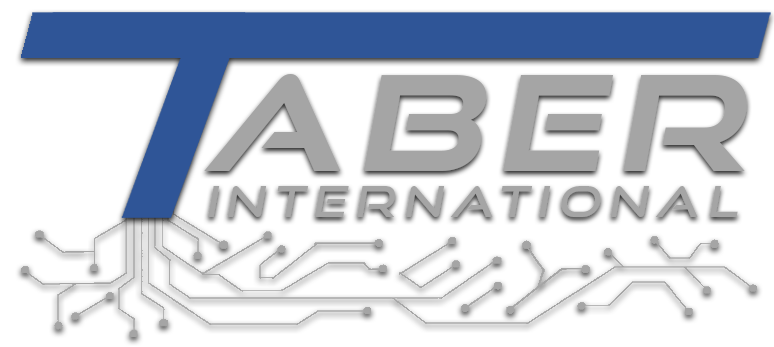
<style>
.page{position:relative;width:774px;height:347px;background:#ffffff}
.page>*{position:absolute;margin:0}
.t1{font:131.4px "GoodTimesRg-BoldItalic";letter-spacing:0.1em;color:#a5a5a5;scale:1.06 1}
.t2{font:42.1px "GoodTimesRg-Italic";letter-spacing:0.2em;color:#a5a5a5;scale:1.04 1}
</style>
<div class="page">
<p class="t1" style="left:204px;top:74px;width:543px;height:97px">aber</p>
<p class="t2" style="left:208px;top:186px;width:530px;height:31px">international</p>
</div>
